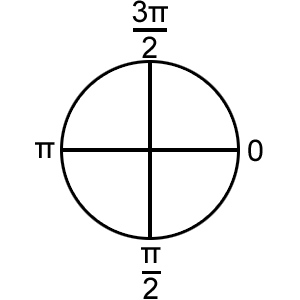
<style>
.page{position:relative;width:300px;height:300px;background:#ffffff}
.page>*{position:absolute;margin:0}
.t1{font:30px "ArialMT";color:#000000}
</style>
<div class="page">
<p class="t1" style="left:132px;top:0px;width:36px;height:58px;text-align:center">3π<br>2</p>
<p class="t1" style="left:35px;top:142px;width:20px;height:16px">π</p>
<p class="t1" style="left:248px;top:139px;width:15px;height:23px">0</p>
<p class="t1" style="left:141px;top:247px;width:20px;height:52px;text-align:center">π<br>2</p>
</div>
